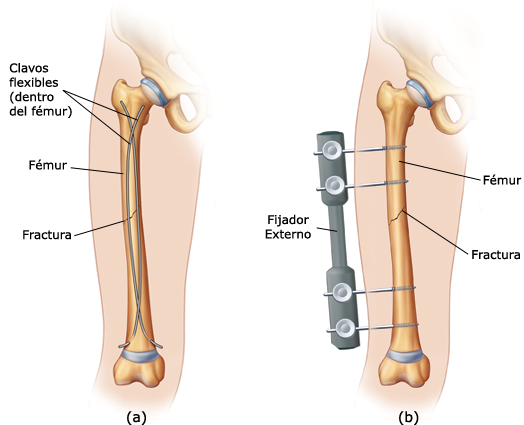
<style>
.page{position:relative;width:524px;height:425px;background:#ffffff}
.page>*{position:absolute;margin:0}
.t1{font:12px "MSReferenceSansSerif";color:#000000}
.t2{font:14px "MSReferenceSansSerif";color:#000000}
</style>
<div class="page">
<p class="t1" style="left:483px;top:174px;width:39px;height:11px">Fémur</p>
<p class="t1" style="left:265px;top:214px;width:46px;height:25px;text-align:center">Fijador<br>Externo</p>
<p class="t1" style="left:472px;top:250px;width:48px;height:10px">Fractura</p>
<p class="t2" style="left:127px;top:411px;width:19px;height:14px">(a)</p>
<p class="t2" style="left:399px;top:411px;width:20px;height:14px">(b)</p>
</div>
